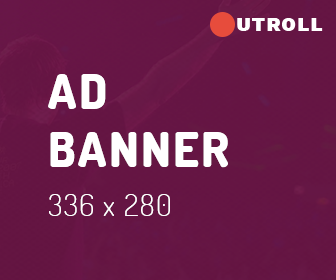
<style>
.page{position:relative;width:336px;height:280px}
.page>*{position:absolute;margin:0}
.t1{font:48px "Dosis-ExtraBold";letter-spacing:0.05em;color:#ffffff}
.t2{font:30px "Dosis-Light";letter-spacing:0.05em;color:#ffffff}
</style>
<div class="page">
<p class="t1" style="left:48px;top:74px;width:180px;height:94px;text-align:right">AD<br>BANNER</p>
<p class="t2" style="left:49px;top:194px;width:121px;height:22px">336 x 280</p>
</div>
